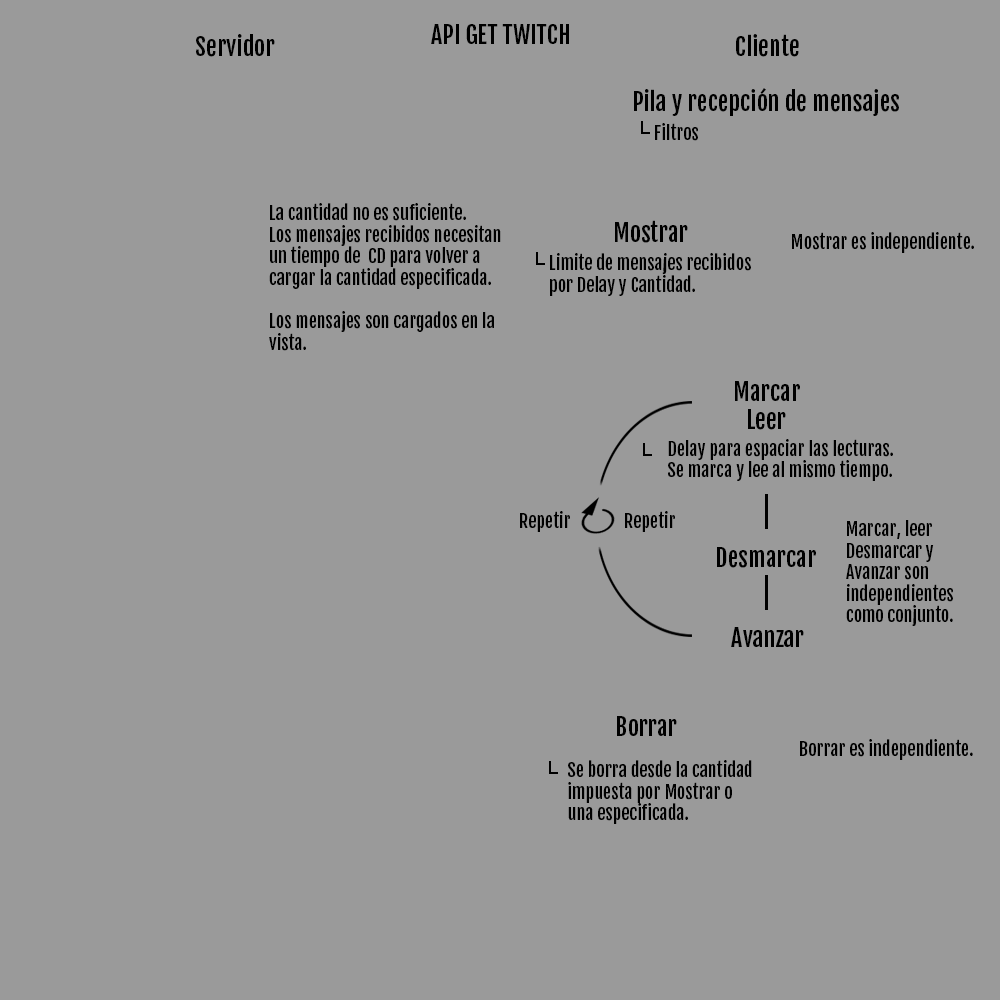
<style>
.page{position:relative;width:1000px;height:1000px;background:#9a9a9a}
.page>*{position:absolute;margin:0}
.t1{font:24px "FjallaOne";color:#000000}
.t2{font:18px "FjallaOne";color:#000000}
</style>
<div class="page">
<p class="t1" style="left:431px;top:24px;width:138px;height:20px">API GET TWITCH</p>
<p class="t1" style="left:196px;top:34px;width:79px;height:23px">Servidor</p>
<p class="t1" style="left:736px;top:34px;width:63px;height:23px">Cliente</p>
<p class="t1" style="left:634px;top:88px;width:265px;height:28px">Pila y recepción de mensajes</p>
<p class="t2" style="left:655px;top:123px;width:43px;height:18px">Filtros</p>
<p class="t2" style="left:269px;top:203px;width:232px;height:148px;text-align:right">La cantidad no es suficiente.<br>Los mensajes recibidos necesitan<br>un tiempo de  CD para volver a<br>cargar la cantidad especificada.<br><br>Los mensajes son cargados en la<br>vista.</p>
<p class="t1" style="left:615px;top:220px;width:73px;height:23px">Mostrar</p>
<p class="t2" style="left:792px;top:232px;width:182px;height:21px">Mostrar es independiente.</p>
<p class="t2" style="left:550px;top:253px;width:201px;height:43px;text-align:right">Limite de mensajes recibidos <br>por Delay y Cantidad.</p>
<p class="t1" style="left:735px;top:381px;width:65px;height:20px">Marcar</p>
<p class="t1" style="left:748px;top:409px;width:38px;height:21px">Leer</p>
<p class="t2" style="left:668px;top:439px;width:225px;height:42px;text-align:right">Delay para espaciar las lecturas.<br>Se marca y lee al mismo tiempo.</p>
<p class="t2" style="left:520px;top:511px;width:50px;height:21px">Repetir</p>
<p class="t2" style="left:625px;top:511px;width:50px;height:21px">Repetir</p>
<p class="t2" style="left:846px;top:520px;width:107px;height:106px;text-align:right">Marcar, leer<br>Desmarcar y<br>Avanzar son<br>independientes<br>como conjunto.</p>
<p class="t1" style="left:717px;top:547px;width:99px;height:21px">Desmarcar</p>
<p class="t1" style="left:731px;top:627px;width:73px;height:20px">Avanzar</p>
<p class="t1" style="left:617px;top:716px;width:60px;height:20px">Borrar</p>
<p class="t2" style="left:800px;top:739px;width:173px;height:21px">Borrar es independiente.</p>
<p class="t2" style="left:568px;top:760px;width:184px;height:64px;text-align:right">Se borra desde la cantidad<br>impuesta por Mostrar o<br>una especificada.</p>
</div>
